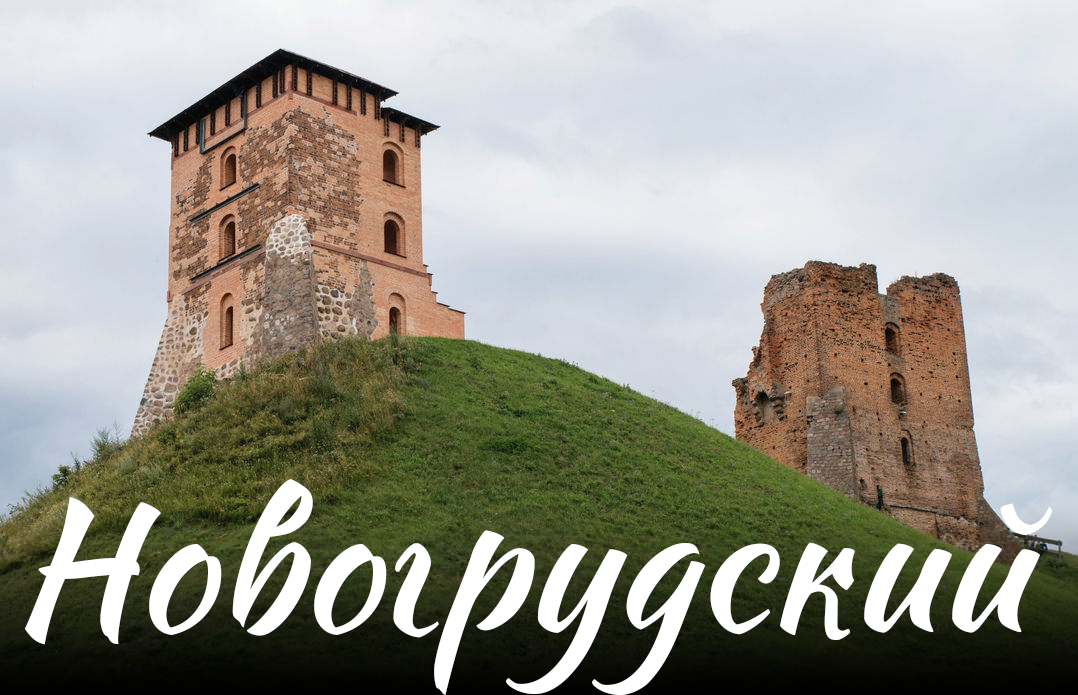
<style>
.page{position:relative;width:1078px;height:695px}
.page>*{position:absolute;margin:0}
.t1{font:179.8px "Sweet-Mavka-Script";color:#ffffff}
</style>
<div class="page">
<p class="t1" style="left:24px;top:479px;width:1029px;height:216px">Новогрудский</p>
</div>
